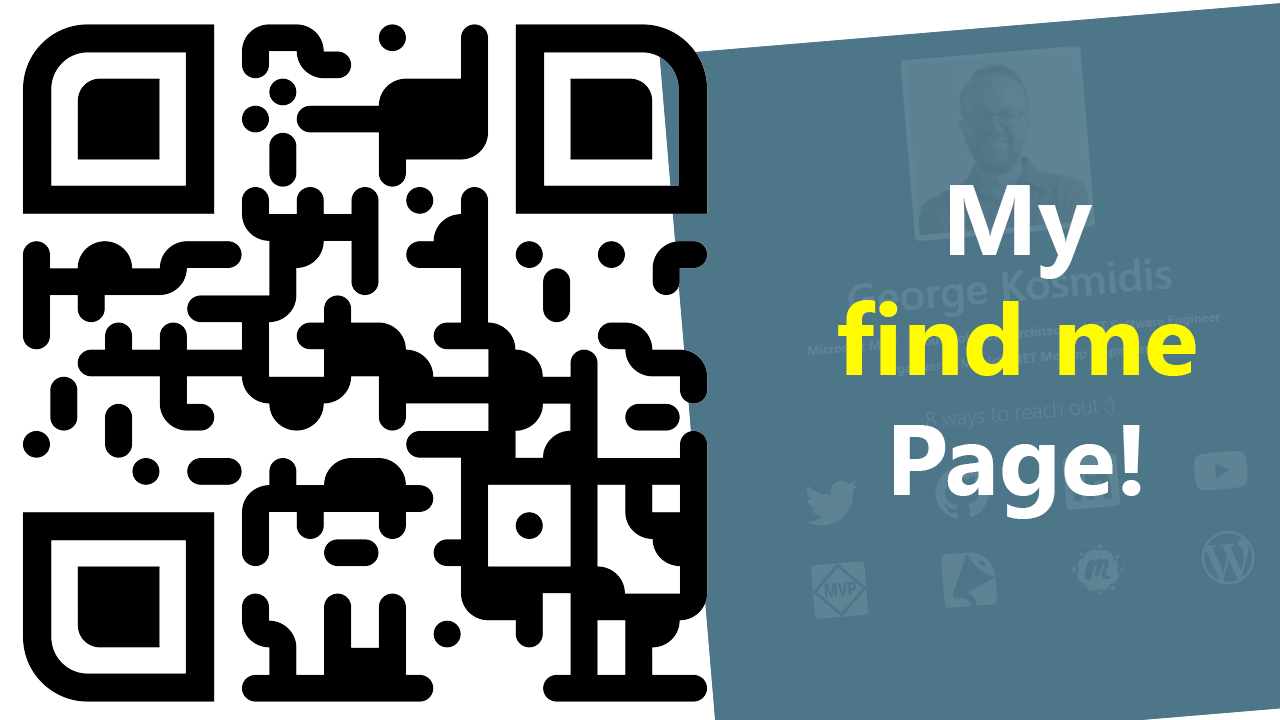
<style>
.page{position:relative;width:1280px;height:720px;background:#4d7689}
.page>*{position:absolute;margin:0}
.t1{font:100px "SegoeUI-Bold";color:#fffc00}
.t2{font:100px "SegoeUI-Bold";color:#ffffff}
</style>
<div class="page">
<p class="t1" style="left:838px;top:185px;width:358px;height:334px;text-align:center"><span class="t2">My <br></span>find me<span class="t2"> <br>Page!</span></p>
</div>
